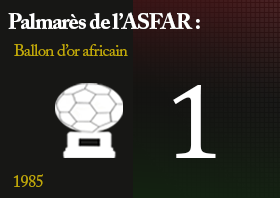
<style>
.page{position:relative;width:280px;height:198px;background:#171715}
.page>*{position:absolute;margin:0}
.t1{font:22.2px "ACaslonPro-Bold";letter-spacing:-0.04em;color:#ffffff}
.t2{font:16.7px "ACaslonPro-Regular";letter-spacing:-0.04em;color:#c0a808}
.t3{font:107.8px "CambriaMath";letter-spacing:-0.04em;color:#ffffff}
</style>
<div class="page">
<p class="t1" style="left:8px;top:12px;width:192px;height:17px">Palmarès de l’ASFAR :</p>
<p class="t2" style="left:14px;top:44px;width:114px;height:12px">Ballon d’or africain</p>
<p class="t3" style="left:173px;top:85px;width:43px;height:73px">1</p>
<p class="t2" style="left:13px;top:174px;width:30px;height:13px">1985</p>
</div>
